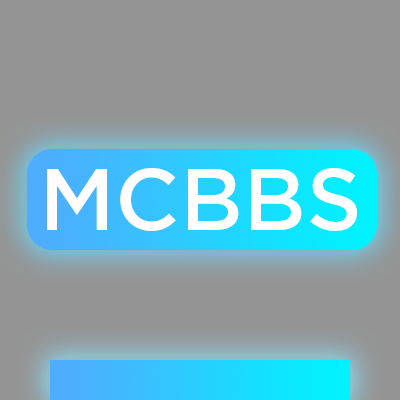
<style>
.page{position:relative;width:400px;height:400px;background:#949494}
.page>*{position:absolute;margin:0}
.t1{font:83.3px "GothamSSm-Medium";color:#fffdfd}
</style>
<div class="page">
<p class="t1" style="left:47px;top:168px;width:310px;height:63px">MCBBS</p>
</div>
